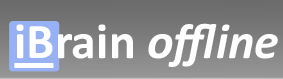
<style>
.page{position:relative;width:283px;height:79px}
.page>*{position:absolute;margin:0}
.t1{font:50.3px "Calibri-BoldItalic";color:#ffffff}
.t2{font:50.3px "Calibri-Bold";color:#ffffff}
</style>
<div class="page">
<p class="t1" style="left:16px;top:23px;width:262px;height:44px"><span class="t2">iBrain </span>offline</p>
</div>
